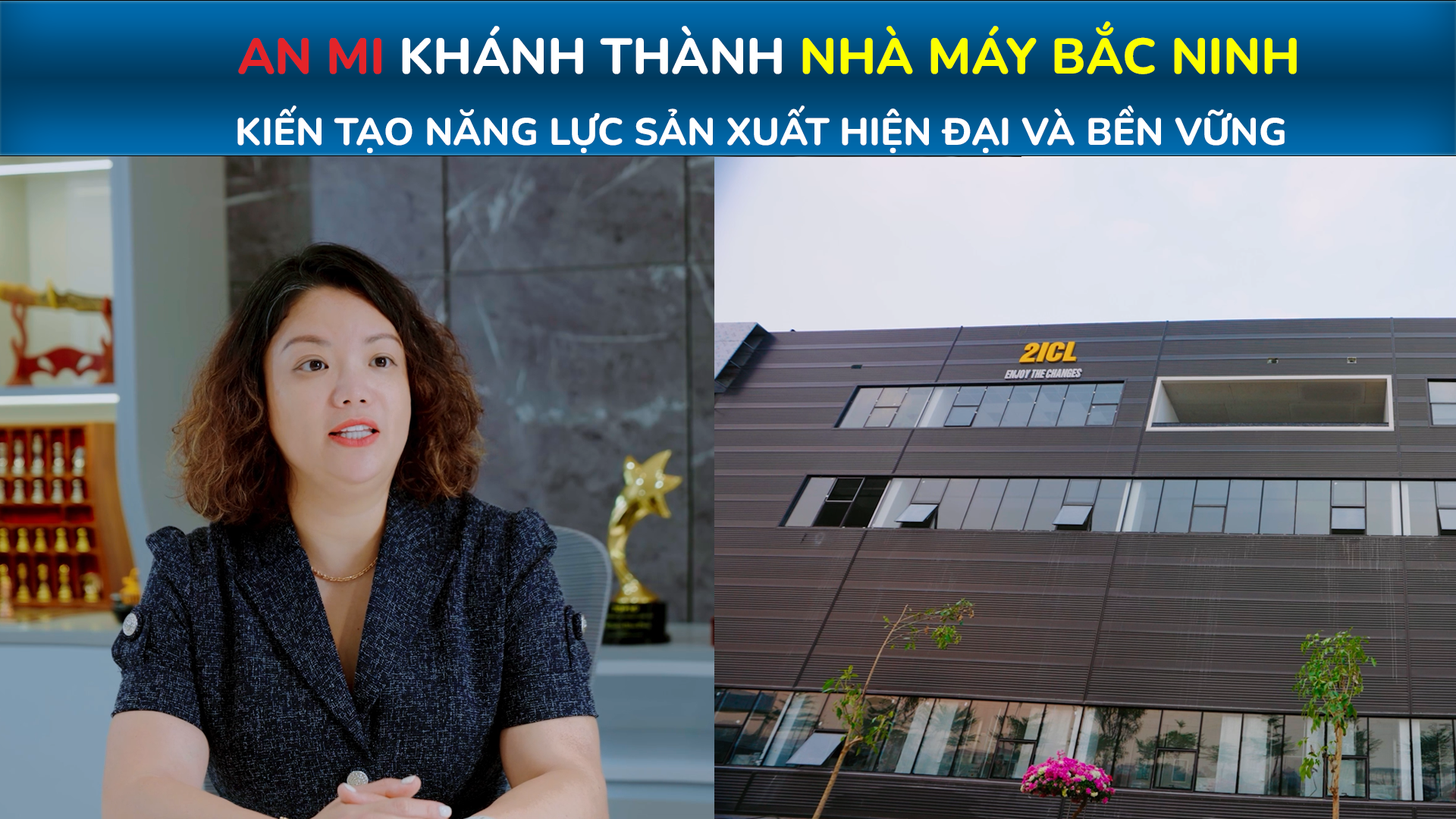
<style>
.page{position:relative;width:1456px;height:819px}
.page>*{position:absolute;margin:0}
.t1{font:50px "Nunito-ExtraBold";color:#fcff00;text-transform:uppercase}
.t2{font:50px "Nunito-ExtraBold";color:#e32429;text-transform:uppercase}
.t3{font:50px "Nunito-ExtraBold";color:#ffffff;text-transform:uppercase}
.t4{font:37.9px "Nunito-ExtraBold";color:#ffffff;text-transform:uppercase}
</style>
<div class="page">
<p class="t1" style="left:238px;top:21px;width:1059px;height:53px"><span class="t2">an mi</span><span class="t3"> khánh thành </span>nhà máy bắc ninh</p>
<p class="t4" style="left:237px;top:105px;width:1048px;height:48px">kiến tạo năng lực sản xuất hiện đại và bền vững</p>
</div>
